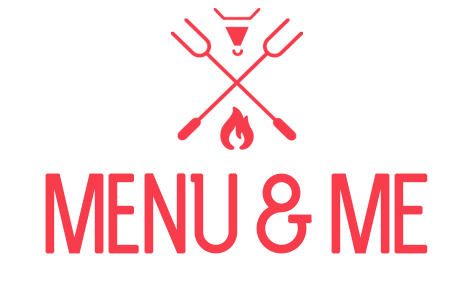
<style>
.page{position:relative;width:468px;height:300px;background:#ffffff}
.page>*{position:absolute;margin:0}
.t1{font:105px "TheLightFont";letter-spacing:-0.1em;color:#f83c4b;font-weight:bold}
</style>
<div class="page">
<p class="t1" style="left:45px;top:173px;width:383px;height:81px">MenU &amp; ME</p>
</div>
